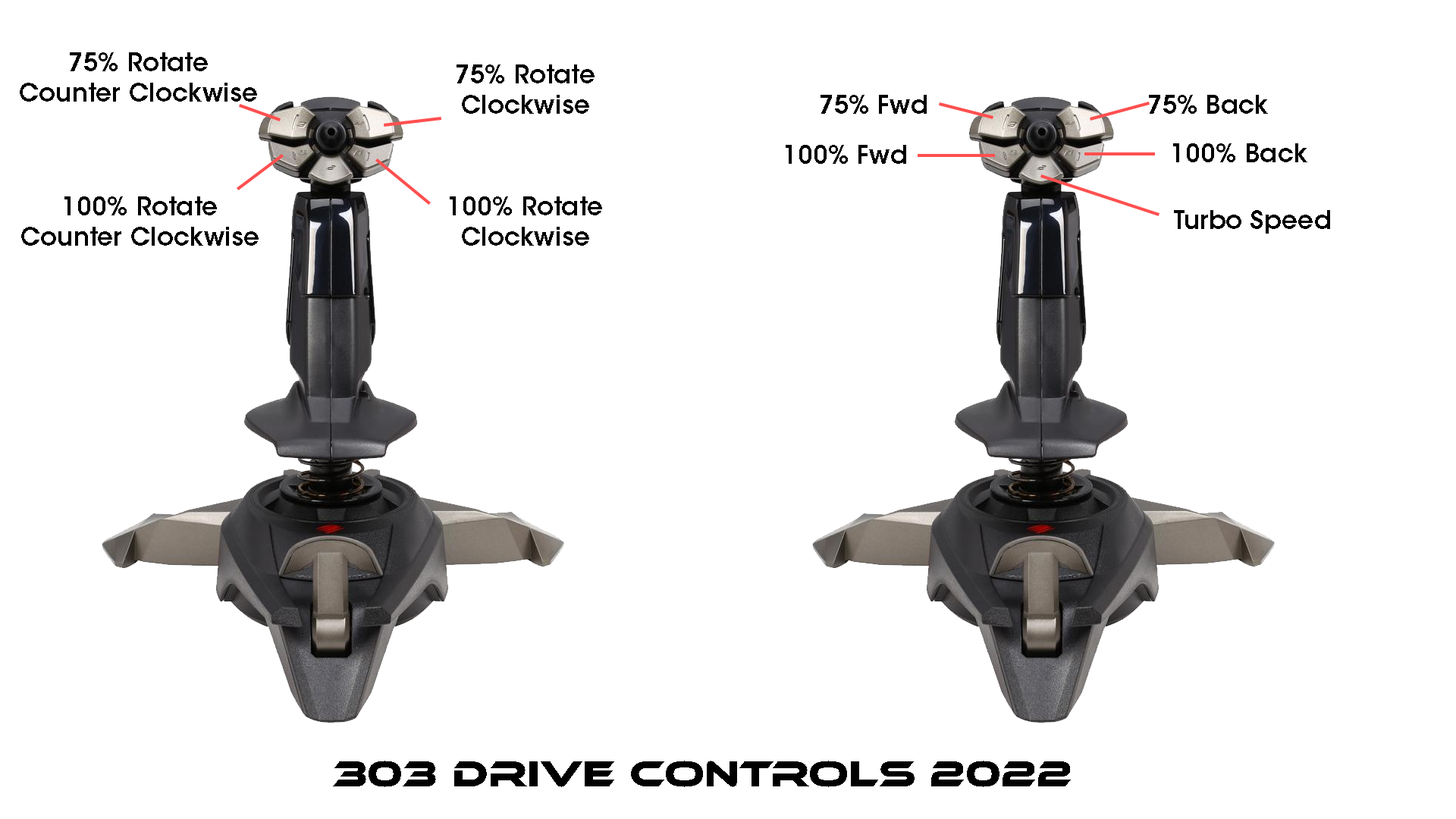
<style>
.page{position:relative;width:1456px;height:819px;background:#ffffff}
.page>*{position:absolute;margin:0}
.t1{font:25.3px "ITCAvantGardeStd-Demi";color:#000000}
.t2{font:37.9px "EthnocentricRg-Regular";color:#000000}
</style>
<div class="page">
<p class="t1" style="left:20px;top:52px;width:237px;height:50px;text-align:center">75% Rotate<br>Counter Clockwise</p>
<p class="t1" style="left:457px;top:64px;width:138px;height:50px;text-align:center">75% Rotate<br>Clockwise</p>
<p class="t1" style="left:821px;top:95px;width:106px;height:19px">75% Fwd</p>
<p class="t1" style="left:1149px;top:95px;width:119px;height:19px">75% Back</p>
<p class="t1" style="left:786px;top:145px;width:120px;height:19px">100% Fwd</p>
<p class="t1" style="left:1173px;top:143px;width:134px;height:19px">100% Back</p>
<p class="t1" style="left:21px;top:196px;width:238px;height:50px;text-align:center">100% Rotate<br>Counter Clockwise</p>
<p class="t1" style="left:450px;top:196px;width:152px;height:50px;text-align:center">100% Rotate<br>Clockwise</p>
<p class="t1" style="left:1174px;top:210px;width:156px;height:24px">Turbo Speed</p>
<p class="t2" style="left:333px;top:761px;width:738px;height:26px">303 Drive Controls 2022</p>
</div>
